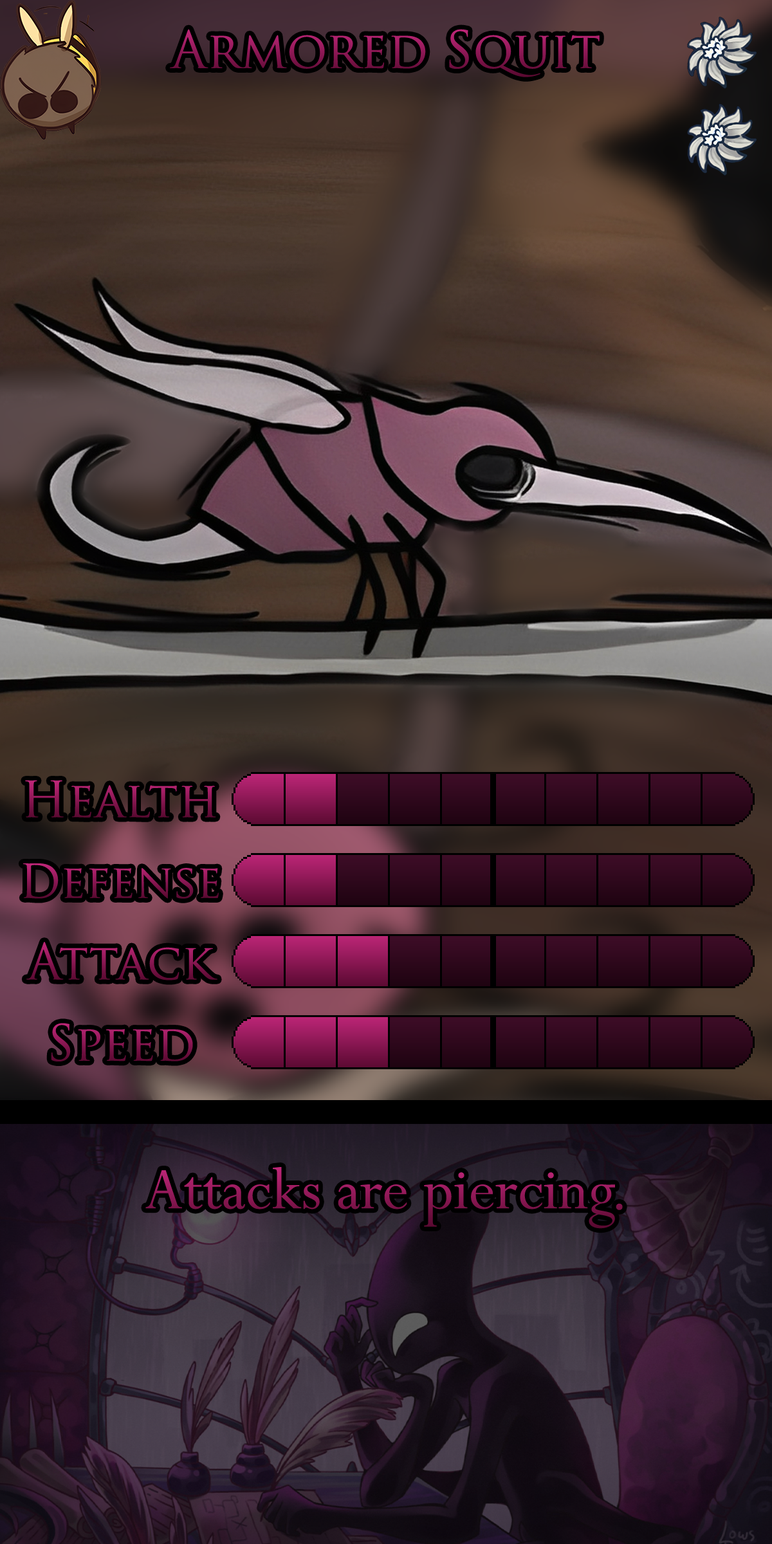
<style>
.page{position:relative;width:772px;height:1544px}
.page>*{position:absolute;margin:0}
.t1{font:86.2px "TrajanPro-Regular"}
.t2{font:83.6px "TrajanPro-Regular"}
.t3{font:78.5px "TrajanPro-Regular"}
.t4{font:112.6px "Perpetua";color:#8d1855}
</style>
<div class="page">
<p class="t1" style="left:170px;top:29px;width:430px;height:48px">Armored Squit</p>
<p class="t2" style="left:25px;top:781px;width:191px;height:37px">Health</p>
<p class="t3" style="left:23px;top:864px;width:196px;height:35px">Defense</p>
<p class="t2" style="left:26px;top:942px;width:191px;height:39px">Attack</p>
<p class="t2" style="left:51px;top:1023px;width:142px;height:39px">Speed</p>
<p class="t4" style="left:145px;top:1167px;width:478px;height:62px">Attacks are piercing.</p>
</div>
